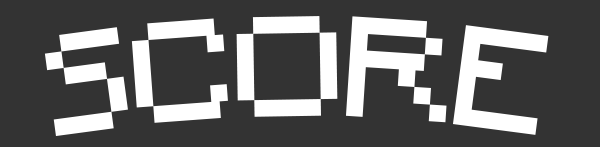
<style>
.page{position:relative;width:600px;height:147px;background:#333333}
.page>*{position:absolute;margin:0}
.t1{font:132.8px "Minecraft";color:#ffffff}
</style>
<div class="page">
<p class="t1" style="left:44px;top:16px;width:505px;height:120px">SCORE</p>
</div>
